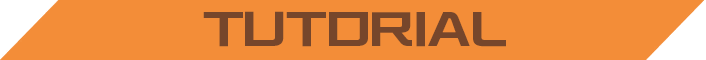
<style>
.page{position:relative;width:706px;height:60px;background:#f38d38}
.page>*{position:absolute;margin:0}
.t1{font:38.7px "KafuTechnoStd-U";color:#76462b;scale:1.21 1}
</style>
<div class="page">
<p class="t1" style="left:203px;top:11px;width:303px;height:36px">TUTORIAL</p>
</div>
